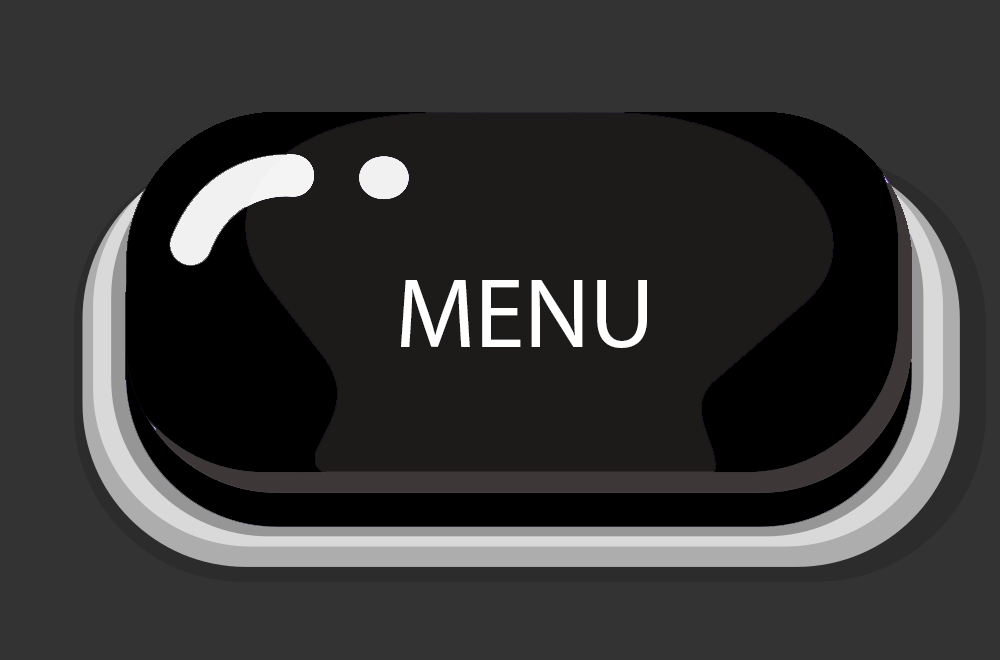
<style>
.page{position:relative;width:1000px;height:660px;background:#333333}
.page>*{position:absolute;margin:0}
.t1{font:100px "MyriadPro-Regular";color:#ffffff}
</style>
<div class="page">
<p class="t1" style="left:401px;top:280px;width:246px;height:68px">MENU</p>
</div>
